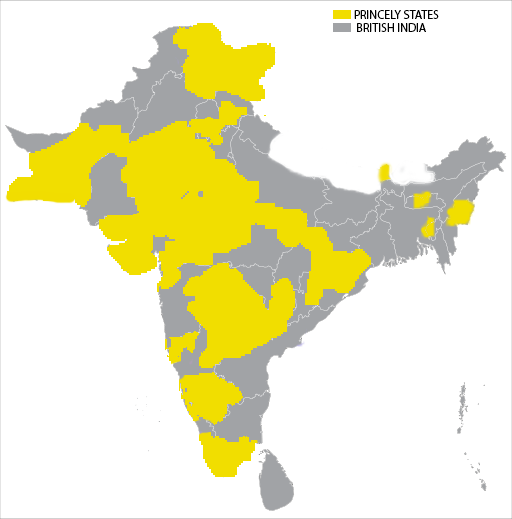
<style>
.page{position:relative;width:512px;height:519px;background:#ffffff}
.page>*{position:absolute;margin:0}
.t1{font:12px "MyriadPro-Regular";color:#000000}
</style>
<div class="page">
<p class="t1" style="left:354px;top:10px;width:85px;height:9px">PRINCELY STATES</p>
<p class="t1" style="left:357px;top:23px;width:69px;height:9px">BRITISH INDIA</p>
</div>
